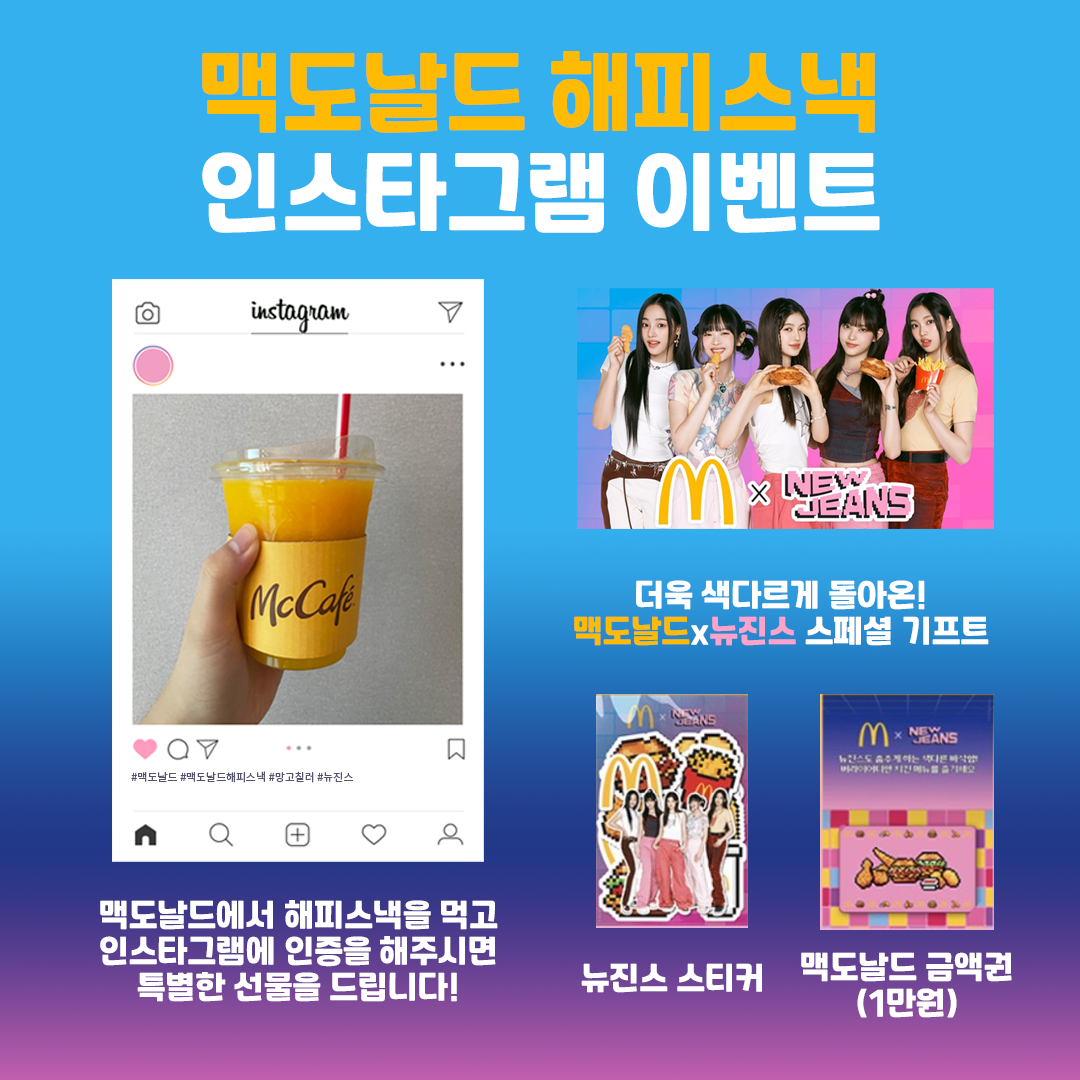
<style>
.page{position:relative;width:1080px;height:1080px;background:#35b0ef}
.page>*{position:absolute;margin:0}
.t1{font:84px/100px "RecipekoreaM";color:#ffba03}
.t2{font:84px/100px "RecipekoreaM";color:#ffffff}
.t3{font:30px "RecipekoreaM";color:#ffffff}
.t4{font:30px "RecipekoreaM";color:#ffba03}
.t5{font:30px "RecipekoreaM";color:#fda3c9}
.t6{font:10.9px "NotoSansKR-Regular";color:#555570}
</style>
<div class="page">
<p class="t1" style="left:202px;top:51px;width:678px;height:182px;text-align:center">맥도날드 해피스낵<br><span class="t2">인스타그램 이벤트</span></p>
<p class="t3" style="left:574px;top:580px;width:415px;height:66px;text-align:center">더욱 색다르게 돌아온!<br><span class="t4">맥도날드</span>x<span class="t5">뉴진스</span> 스페셜 기프트</p>
<p class="t6" style="left:131px;top:771px;width:222px;height:12px">#맥도날드 #맥도날드해피스낵 #망고칠러 #뉴진스</p>
<p class="t3" style="left:100px;top:900px;width:398px;height:102px;text-align:center">맥도날드에서 해피스낵을 먹고<br>인스타그램에 인증을 해주시면<br>특별한 선물을 드립니다!</p>
<p class="t3" style="left:801px;top:952px;width:211px;height:66px;text-align:center">맥도날드 금액권<br>(1만원)</p>
<p class="t3" style="left:581px;top:963px;width:181px;height:30px">뉴진스 스티커</p>
</div>
